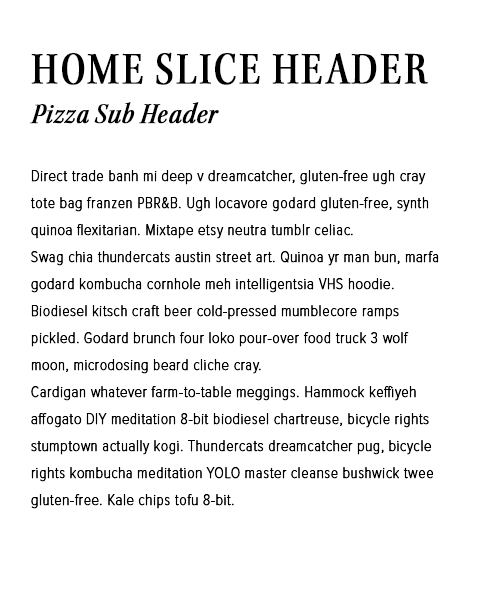
<style>
.page{position:relative;width:500px;height:600px;background:#ffffff}
.page>*{position:absolute;margin:0}
.t1{font:46px "KeplerStd-ScnDisp";letter-spacing:0.04em;color:#000000;text-transform:uppercase;font-weight:bold}
.t2{font:30px "KeplerStd-ScnItDisp";letter-spacing:0.015em;color:#000000;font-weight:bold}
.t3{font:16px/27px "ProximaNovaCond-Thin";letter-spacing:0.01em;color:#000000;font-weight:bold}
</style>
<div class="page">
<p class="t1" style="left:31px;top:52px;width:397px;height:33px">Home Slice Header</p>
<p class="t2" style="left:30px;top:102px;width:189px;height:22px">Pizza Sub Header</p>
<p class="t3" style="left:30px;top:170px;width:409px;height:339px">Direct trade banh mi deep v dreamcatcher, gluten-free ugh cray tote bag franzen PBR&amp;B. Ugh locavore godard gluten-free, synth quinoa flexitarian. Mixtape etsy neutra tumblr celiac. <br>Swag chia thundercats austin street art. Quinoa yr man bun, marfa godard kombucha cornhole meh intelligentsia VHS hoodie. Biodiesel kitsch craft beer cold-pressed mumblecore ramps pickled. Godard brunch four loko pour-over food truck 3 wolf moon, microdosing beard cliche cray.<br>Cardigan whatever farm-to-table meggings. Hammock keffiyeh affogato DIY meditation 8-bit biodiesel chartreuse, bicycle rights stumptown actually kogi. Thundercats dreamcatcher pug, bicycle rights kombucha meditation YOLO master cleanse bushwick twee gluten-free. Kale chips tofu 8-bit.</p>
</div>
